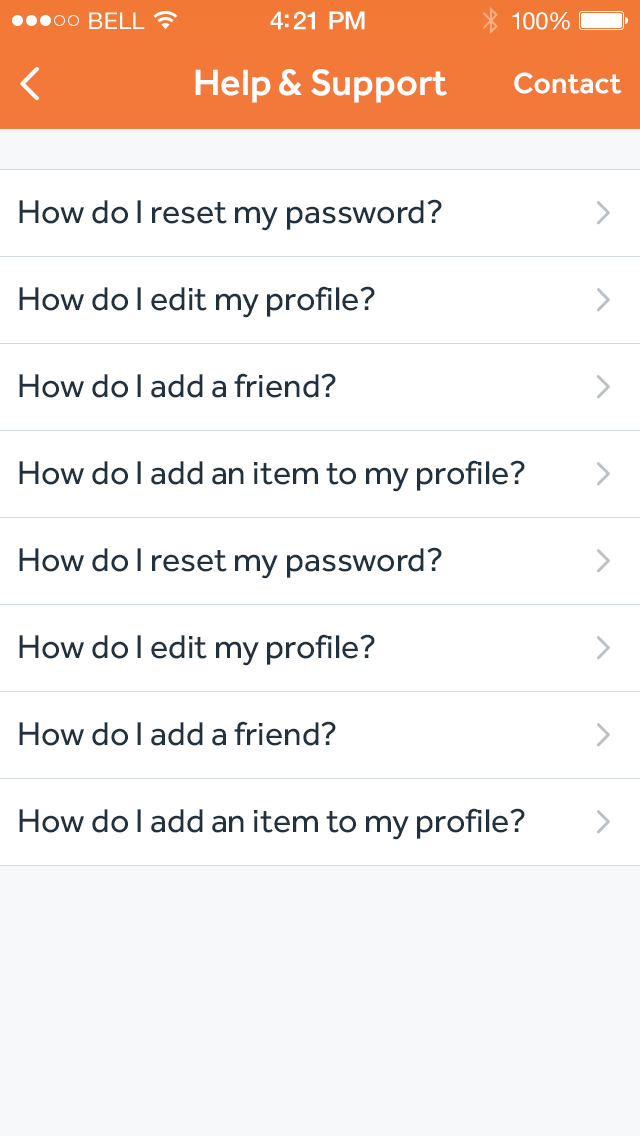
<style>
.page{position:relative;width:640px;height:1136px;background:#ffffff}
.page>*{position:absolute;margin:0}
.t1{font:23px "HelveticaNeue";letter-spacing:0.02em;color:#ffffff}
.t2{font:25px "HelveticaNeue-Medium";letter-spacing:-0.02em;color:#ffffff}
.t3{font:24px "HelveticaNeue";letter-spacing:-0.02em;color:#ffffff}
.t4{font:38px "Effra-Medium";color:#ffffff}
.t5{font:30px "Effra-Medium";color:#ffffff}
.t6{font:34px "Effra-Regular";color:#22313f}
</style>
<div class="page">
<p class="t1" style="left:89px;top:12px;width:56px;height:17px">BELL</p>
<p class="t2" style="left:270px;top:11px;width:95px;height:19px">4:21 PM</p>
<p class="t3" style="left:512px;top:12px;width:58px;height:18px">100%</p>
<p class="t4" style="left:195px;top:69px;width:252px;height:34px">Help &amp; Support</p>
<p class="t5" style="left:514px;top:72px;width:108px;height:22px">Contact</p>
<p class="t6" style="left:19px;top:199px;width:423px;height:32px">How do I reset my password?</p>
<p class="t6" style="left:19px;top:286px;width:356px;height:32px">How do I edit my profile?</p>
<p class="t6" style="left:19px;top:373px;width:317px;height:25px">How do I add a friend?</p>
<p class="t6" style="left:19px;top:460px;width:506px;height:32px">How do I add an item to my profile?</p>
<p class="t6" style="left:19px;top:547px;width:423px;height:32px">How do I reset my password?</p>
<p class="t6" style="left:19px;top:634px;width:356px;height:32px">How do I edit my profile?</p>
<p class="t6" style="left:19px;top:721px;width:317px;height:25px">How do I add a friend?</p>
<p class="t6" style="left:19px;top:808px;width:506px;height:32px">How do I add an item to my profile?</p>
</div>
